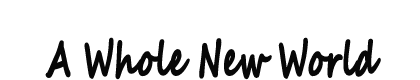
<style>
.page{position:relative;width:420px;height:80px;background:#ffffff}
.page>*{position:absolute;margin:0}
.t1{font:48px "SegoeScript-Bold";color:#070707;font-weight:bold;scale:0.61 1}
</style>
<div class="page">
<p class="t1" style="left:45px;top:37px;width:336px;height:43px">A Whole New World</p>
</div>
